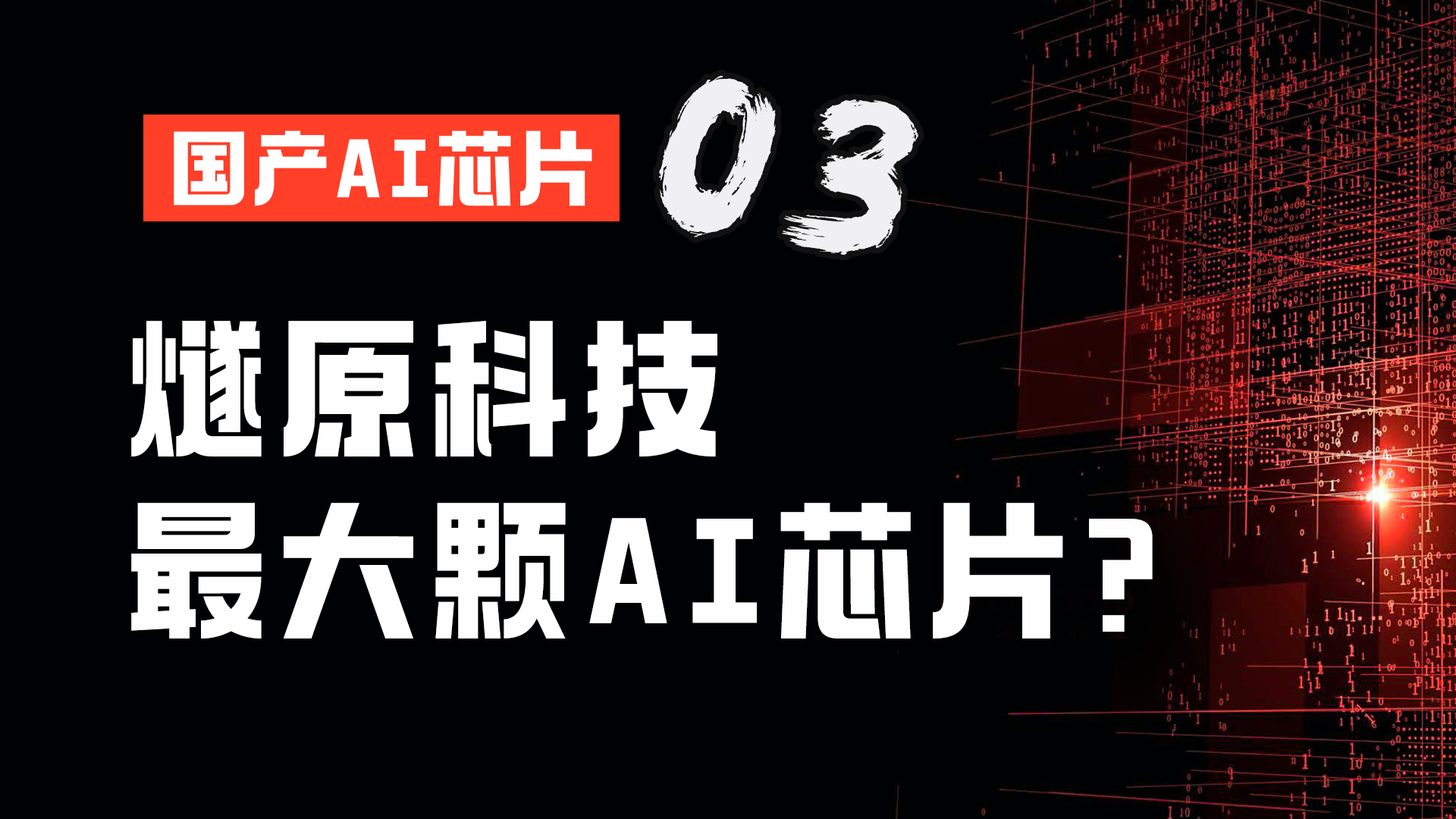
<style>
.page{position:relative;width:1456px;height:819px;background:#000102}
.page>*{position:absolute;margin:0}
.t1{font:212.3px "REEJI-CHAO-BeiMingGBT-Flash";letter-spacing:0.01em;color:#f0f0f2}
.t2{font:83.6px "098-";letter-spacing:0.05em;color:#ffffff}
.t3{font:151.7px/182px "098-";letter-spacing:0.075em;color:#fefeff}
</style>
<div class="page">
<p class="t1" style="left:659px;top:76px;width:259px;height:179px;rotate:9deg">03</p>
<p class="t2" style="left:174px;top:130px;width:418px;height:76px">国产AI芯片</p>
<p class="t3" style="left:131px;top:321px;width:1022px;height:318px">燧原科技<br>最大颗AI芯片?</p>
</div>
